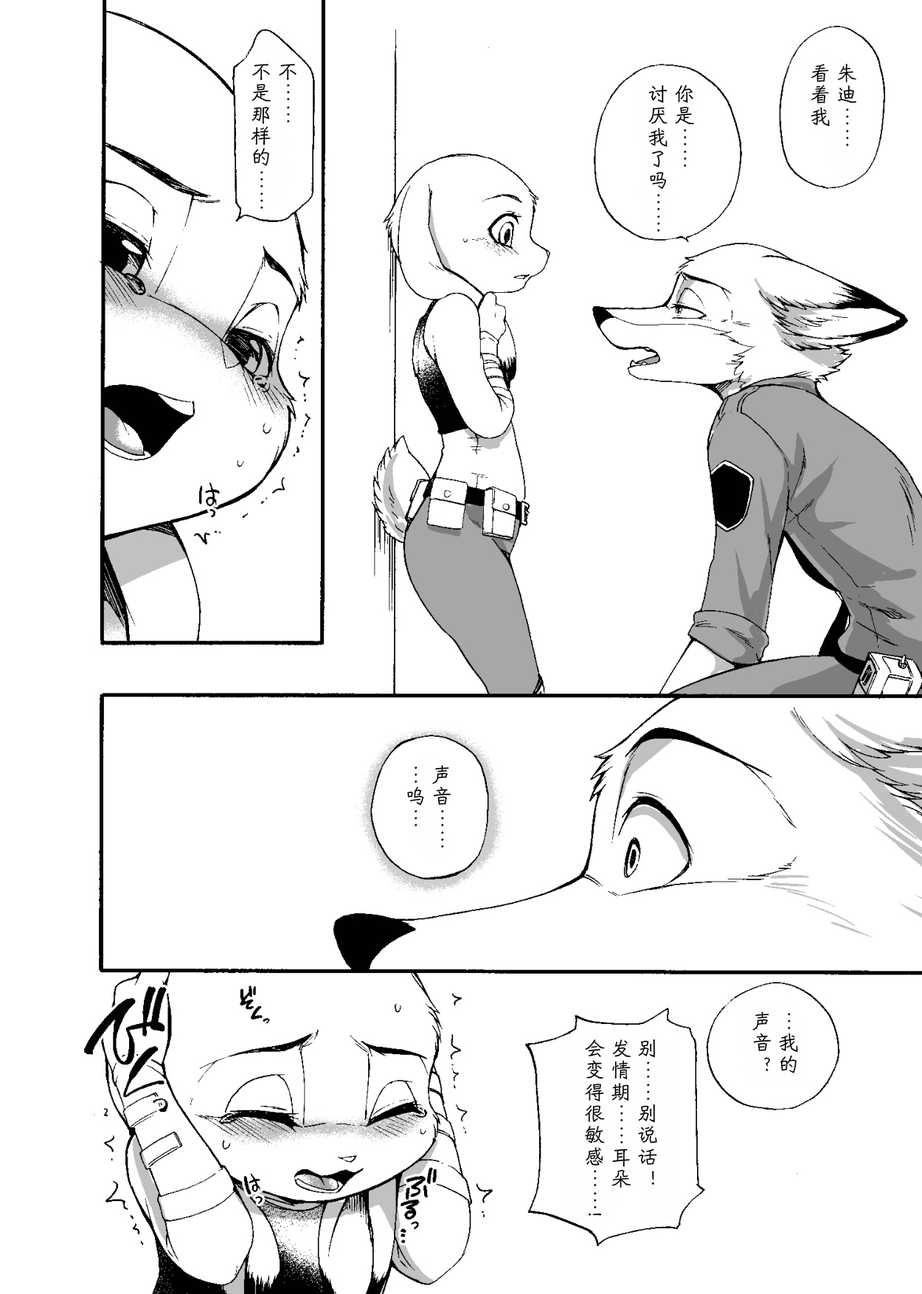
<style>
.page{position:relative;width:922px;height:1294px;background:#ffffff}
.page>*{position:absolute;margin:0}
.t1{font:20.6px/26.5px "HYShiWei55U";letter-spacing:0.05em;color:#000000}
</style>
<div class="page">
<p class="t1" style="left:251px;top:63px;width:45px;height:146px">不……<br>不是那样的……</p>
<p class="t1" style="left:810px;top:63px;width:46px;height:84px">朱迪……<br>看着我</p>
<p class="t1" style="left:648px;top:85px;width:46px;height:147px">你是……<br>讨厌我了吗……</p>
<p class="t1" style="left:407px;top:765px;width:44px;height:83px">声音……<br>…呜…</p>
<p class="t1" style="left:752px;top:1011px;width:46px;height:62px">…我的<br>声音？</p>
<p class="t1" style="left:585px;top:1038px;width:72px;height:177px">别……别说话！<br>发情期……耳朵<br>会变得很敏感……!</p>
</div>
